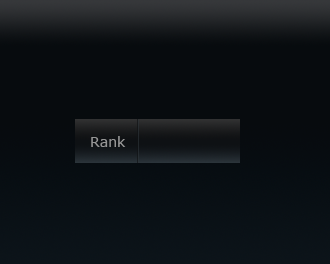
<style>
.page{position:relative;width:330px;height:264px;background:#070b0e}
.page>*{position:absolute;margin:0}
.t1{font:14px "Verdana";color:#959595}
</style>
<div class="page">
<p class="t1" style="left:91px;top:136px;width:35px;height:11px">Rank</p>
</div>
